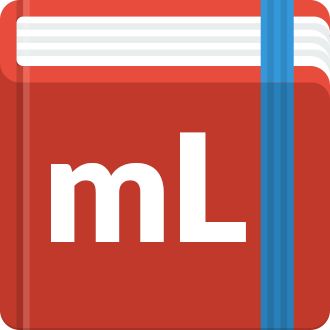
<style>
.page{position:relative;width:330px;height:330px;background:#c0392b}
.page>*{position:absolute;margin:0}
.t1{font:150px "Lato-Black";color:#ffffff}
</style>
<div class="page">
<p class="t1" style="left:51px;top:132px;width:195px;height:110px">mL</p>
</div>
